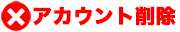
<style>
.page{position:relative;width:180px;height:32px;background:#ffffff}
.page>*{position:absolute;margin:0}
.t1{font:20px "HiraKakuStdN-W8";color:#ff0000;font-weight:bold}
</style>
<div class="page">
<p class="t1" style="left:33px;top:6px;width:143px;height:20px">アカウント削除</p>
</div>
